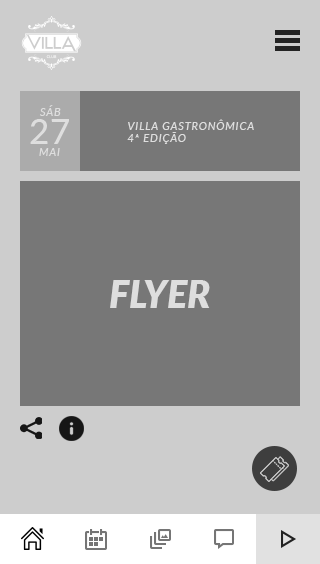
<style>
.page{position:relative;width:320px;height:564px;background:#777777}
.page>*{position:absolute;margin:0}
.t1{font:10.6px "Lato-Italic";letter-spacing:0.1em;color:#dedede;text-transform:uppercase}
.t2{font:35px "Lato-Medium";color:#dedede;text-transform:uppercase}
.t3{font:37.5px "Lato-BlackItalic";color:#dedede;text-transform:uppercase}
</style>
<div class="page">
<p class="t1" style="left:40px;top:105px;width:21px;height:11px">sáb</p>
<p class="t2" style="left:30px;top:119px;width:39px;height:25px">27</p>
<p class="t1" style="left:127px;top:119px;width:127px;height:25px">villa gastronômica<br>4ª edição</p>
<p class="t1" style="left:39px;top:148px;width:21px;height:8px">mai</p>
<p class="t3" style="left:110px;top:280px;width:100px;height:28px">flyer</p>
</div>
